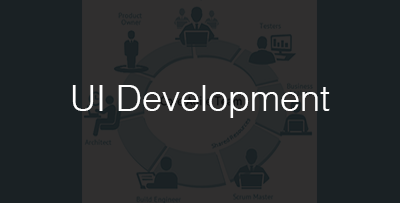
<style>
.page{position:relative;width:400px;height:203px;background:#1a2124}
.page>*{position:absolute;margin:0}
.t1{font:36px "Helvetica-Light";color:#ffffff}
</style>
<div class="page">
<p class="t1" style="left:72px;top:85px;width:258px;height:33px">UI Development</p>
</div>
